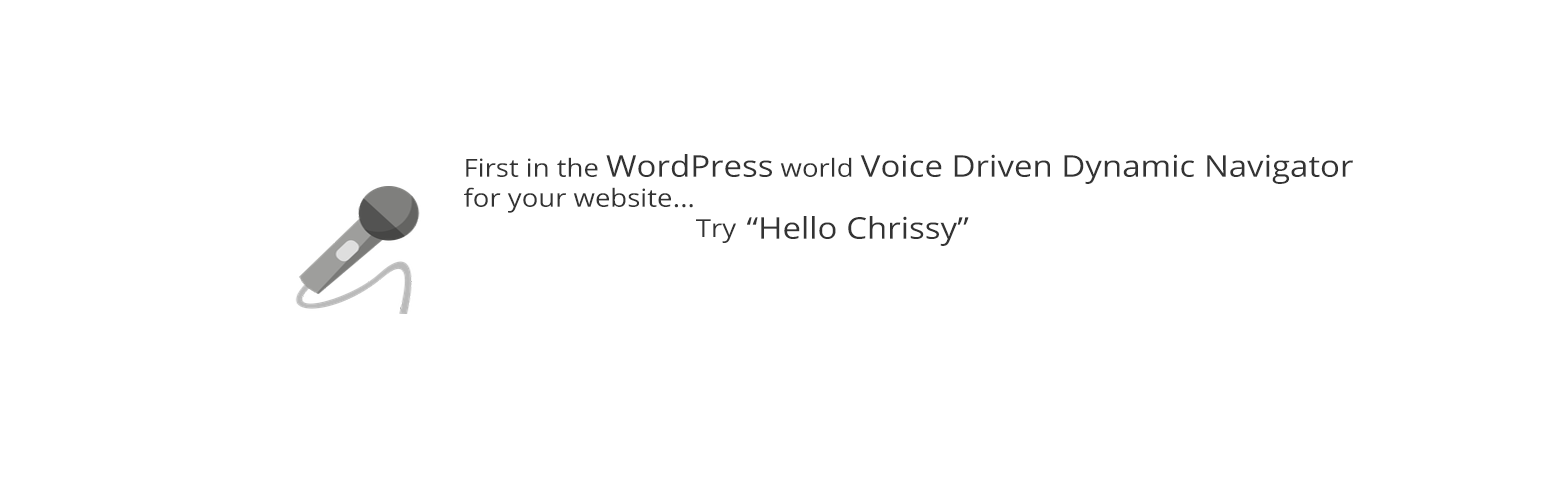
<style>
.page{position:relative;width:1544px;height:500px;background:#ffffff}
.page>*{position:absolute;margin:0}
.t1{font:30px "OpenSans";color:#333333;scale:1.1 1}
.t2{font:25px "OpenSans";color:#333333;scale:1.1 1}
</style>
<div class="page">
<p class="t1" style="left:464px;top:154px;width:889px;height:59px;text-align:right"><span class="t2">First in the </span>WordPress<span class="t2"> world </span>Voice Driven Dynamic Navigator<span class="t2"> for your website</span></p>
<p class="t2" style="left:674px;top:204px;width:19px;height:4px">...</p>
<p class="t2" style="left:696px;top:219px;width:40px;height:24px">Try</p>
<p class="t1" style="left:747px;top:216px;width:222px;height:30px">“Hello Chrissy”</p>
</div>
